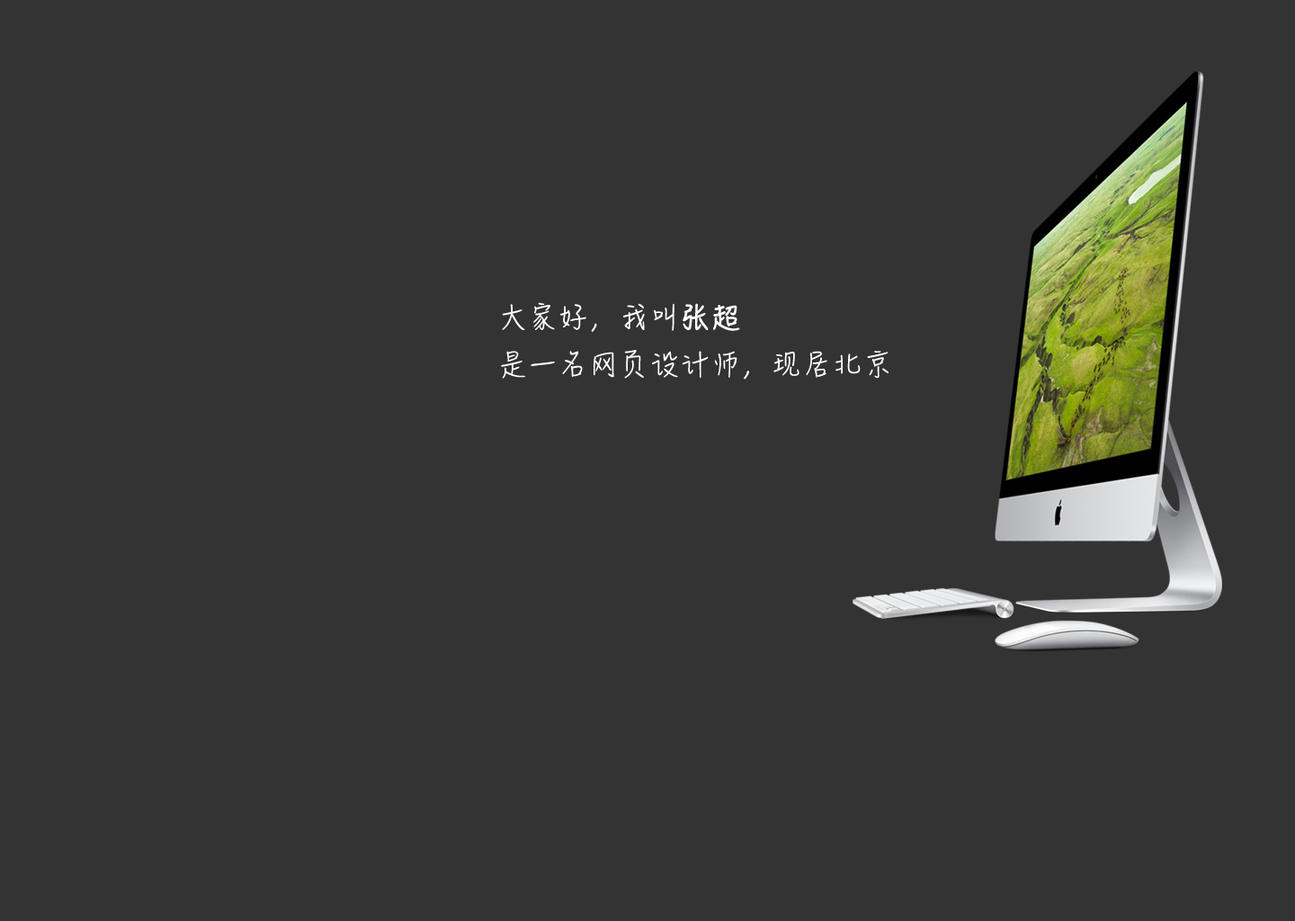
<style>
.page{position:relative;width:1295px;height:921px;background:#333333}
.page>*{position:absolute;margin:0}
.t1{font:27px "HanziPenSC-W3";letter-spacing:0.1em;color:#ffffff}
.t2{font:27px "HanziPenSC-W3";letter-spacing:0.1em;color:#ffffff;font-weight:bold}
</style>
<div class="page">
<p class="t1" style="left:501px;top:302px;width:387px;height:77px">大家好，我叫<span class="t2">张超<br></span>是一名网页设计师，现居北京</p>
</div>
